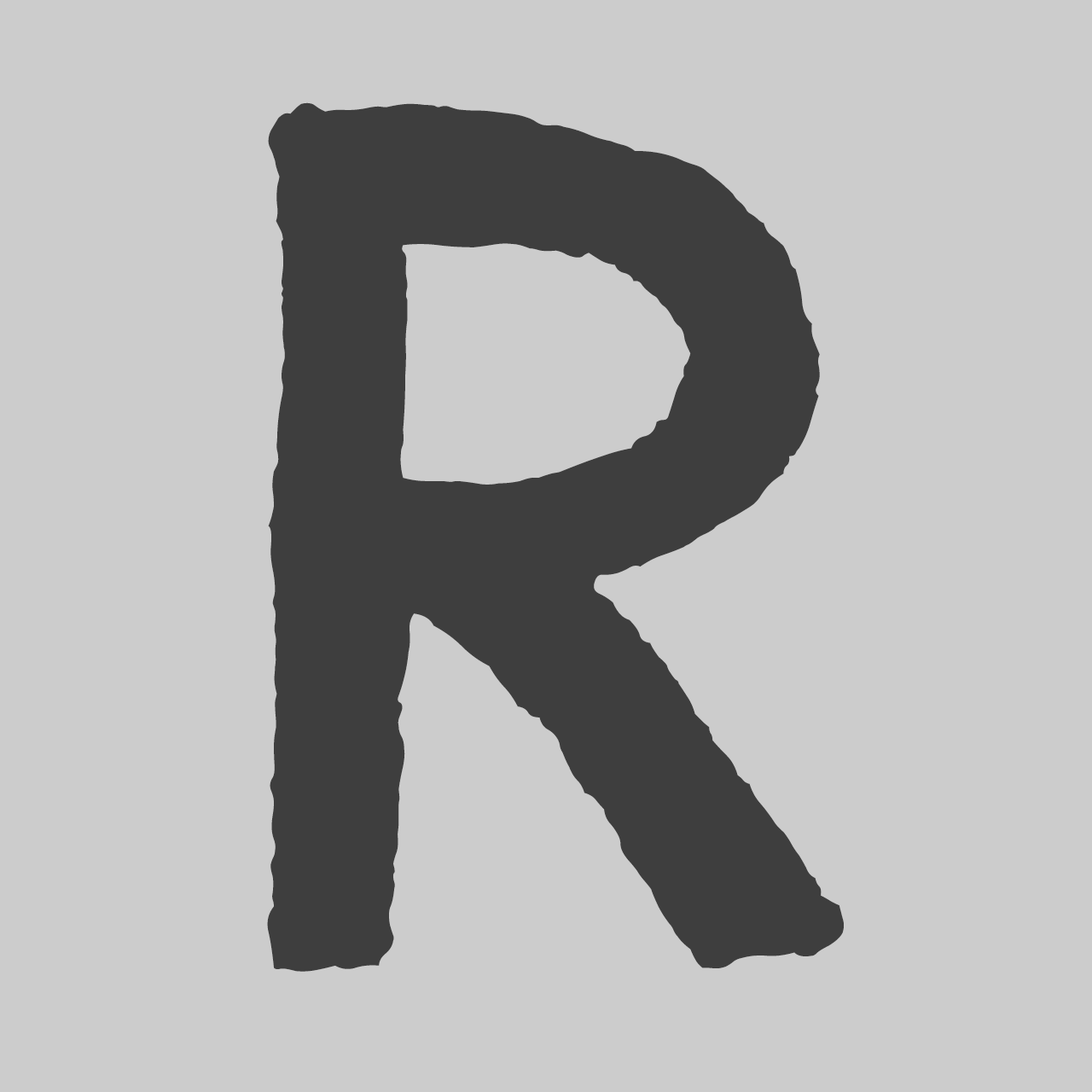
<style>
.page{position:relative;width:1092px;height:1092px;background:#cccccc}
.page>*{position:absolute;margin:0}
.t1{font:1119.4px "ChelseaMarket-Regular";color:#3e3e3e}
</style>
<div class="page">
<p class="t1" style="left:267px;top:102px;width:577px;height:870px">R</p>
</div>
